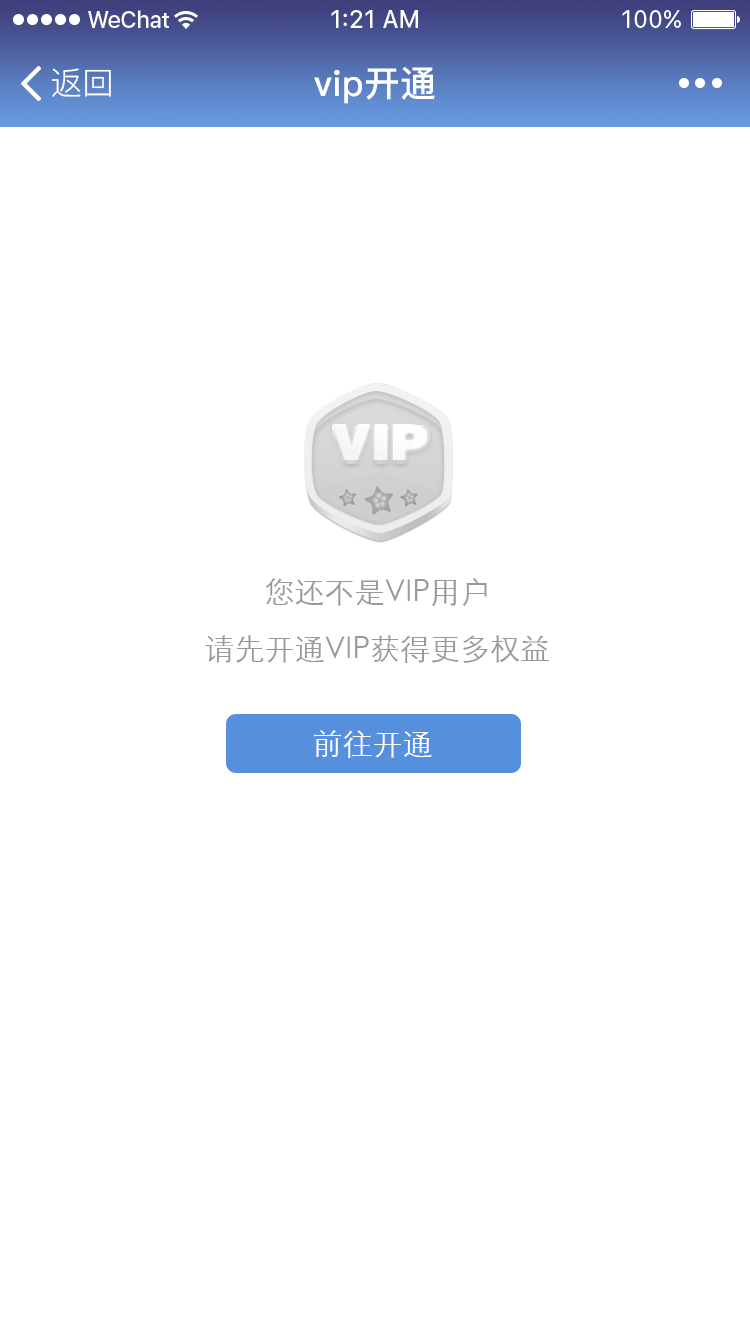
<style>
.page{position:relative;width:750px;height:1334px;background:#ffffff}
.page>*{position:absolute;margin:0}
.t1{font:32px "PingFang-SC-Regular";color:#ffffff}
.t2{font:36px "PingFang-SC-Bold";color:#ffffff}
.t3{font:30px "STXihei";color:#999999}
.t4{font:30px "STXihei";color:#999999;text-transform:uppercase}
.t5{font:30px "STXihei";color:#ffffff}
</style>
<div class="page">
<p class="t1" style="left:52px;top:68px;width:59px;height:29px">返回</p>
<p class="t2" style="left:314px;top:66px;width:121px;height:38px">vip开通</p>
<p class="t3" style="left:265px;top:578px;width:222px;height:28px">您还不是<span class="t4">vip</span>用户</p>
<p class="t3" style="left:205px;top:635px;width:344px;height:28px">请先开通<span class="t4">vip</span>获得更多权益</p>
<p class="t5" style="left:314px;top:730px;width:118px;height:28px">前往开通</p>
</div>
